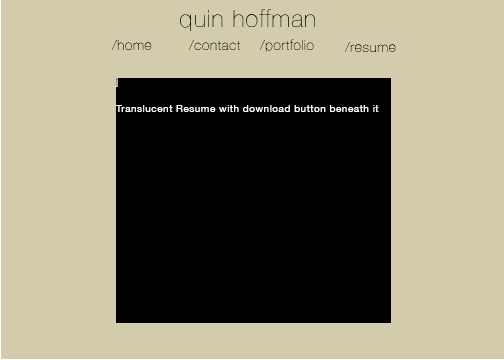
<style>
.page{position:relative;width:504px;height:360px;background:#d3ccac}
.page>*{position:absolute;margin:0}
.t1{font:24px "HelveticaNeue-UltraLight";letter-spacing:0.05em;color:#0b0c0a}
.t2{font:14px "HelveticaNeue-UltraLight";letter-spacing:0.05em}
.t3{font:14px "HelveticaNeue-UltraLight";letter-spacing:0.05em;color:#0b0c0a}
.t4{font:10px/27px "HelveticaNeue";letter-spacing:0.05em;color:#ffffff}
</style>
<div class="page">
<p class="t1" style="left:180px;top:9px;width:135px;height:22px">quin hoffman</p>
<p class="t2" style="left:111px;top:40px;width:41px;height:10px">/home</p>
<p class="t2" style="left:188px;top:40px;width:53px;height:10px">/contact</p>
<p class="t3" style="left:259px;top:39px;width:55px;height:13px">/portfolio</p>
<p class="t3" style="left:344px;top:42px;width:52px;height:10px">/resume</p>
<p class="t4" style="left:115px;top:78px;width:264px;height:34px">j<br>Translucent Resume with download button beneath it</p>
</div>
